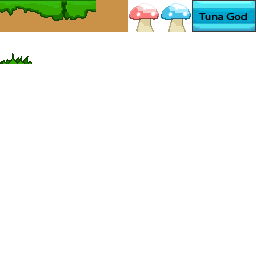
<style>
.page{position:relative;width:256px;height:256px;background:#ffffff}
.page>*{position:absolute;margin:0}
.t1{font:9.9px "MyriadPro-Regular";color:#000000;scale:1.21 1}
</style>
<div class="page">
<p class="t1" style="left:199px;top:13px;width:48px;height:7px">Tuna God</p>
</div>
